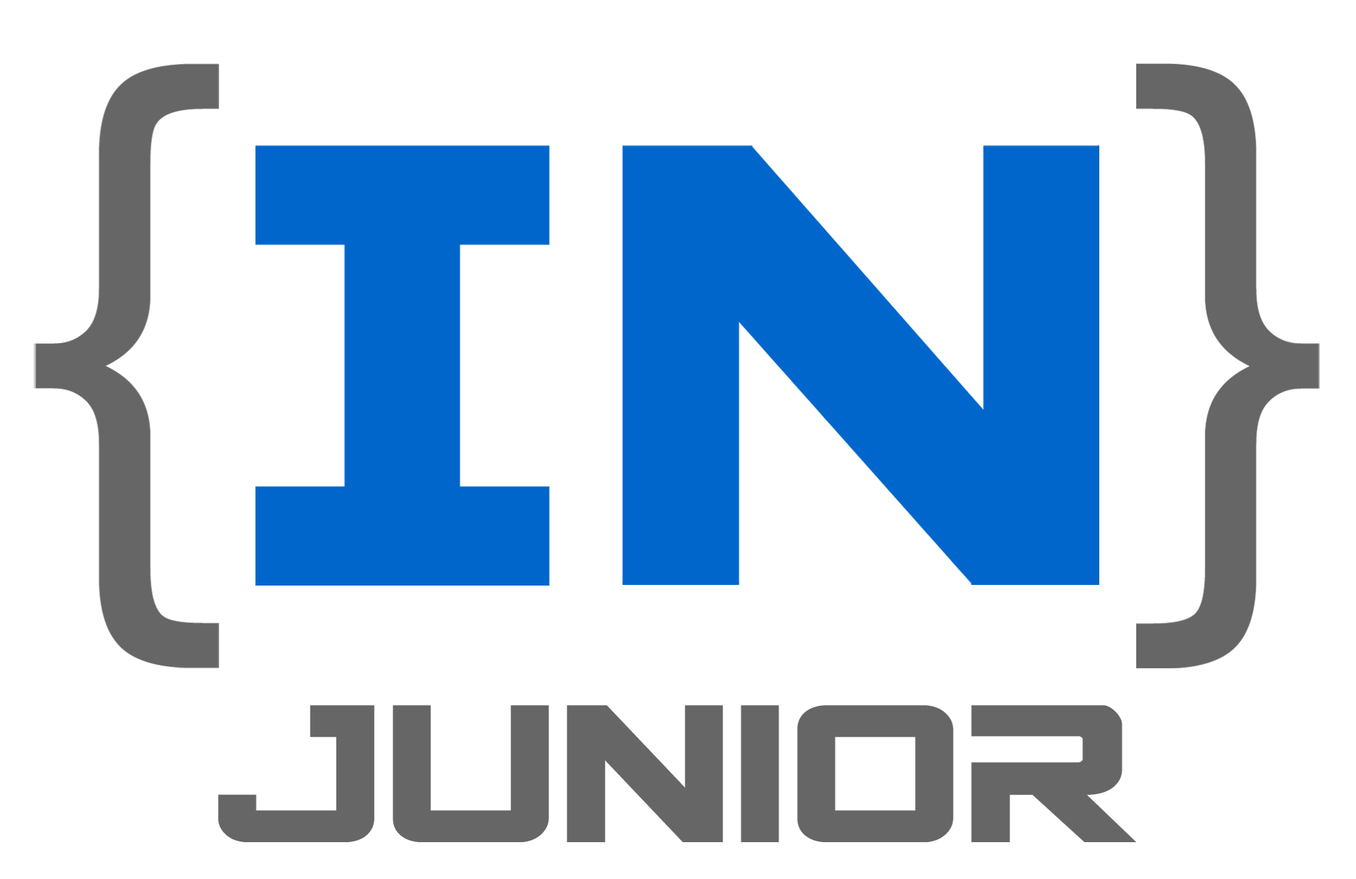
<style>
.page{position:relative;width:1356px;height:879px;background:#ffffff}
.page>*{position:absolute;margin:0}
.t1{font:702.3px "DIN";color:#666666}
.t2{font:703.5px "DIN";color:#666666}
.t3{font:703.1px "SpyAgency";color:#0066cc;scale:0.93 1}
.t4{font:700.9px "SpyAgency";color:#0066cc;scale:0.93 1}
.t5{font:219.3px "SpyAgency";color:#666666;font-weight:bold}
</style>
<div class="page">
<p class="t1" style="left:34px;top:63px;width:185px;height:606px">{</p>
<p class="t2" style="left:1136px;top:63px;width:184px;height:606px">}</p>
<p class="t3" style="left:255px;top:145px;width:829px;height:441px">IN</p>
<p class="t4" style="left:273px;top:145px;width:826px;height:440px">IN</p>
<p class="t5" style="left:218px;top:705px;width:918px;height:138px">Junior</p>
</div>
